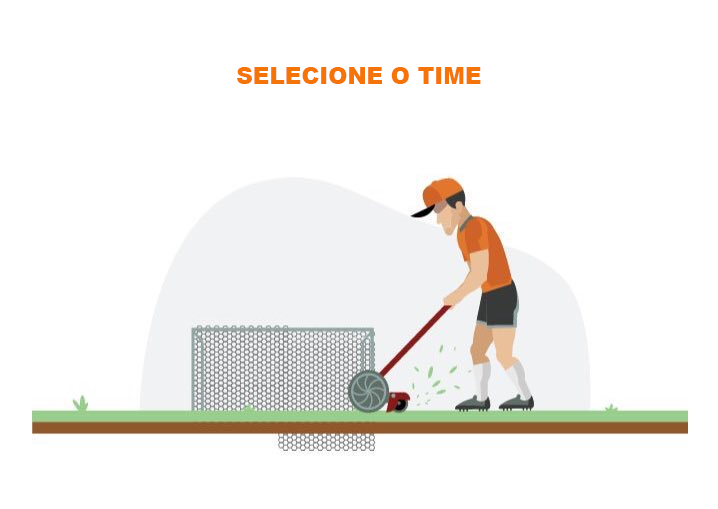
<style>
.page{position:relative;width:718px;height:509px;background:#ffffff}
.page>*{position:absolute;margin:0}
.t1{font:23px "Arial-Black";color:#f5740a}
</style>
<div class="page">
<p class="t1" style="left:237px;top:67px;width:244px;height:17px">SELECIONE O TIME</p>
</div>
